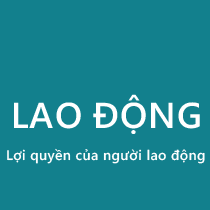
<style>
.page{position:relative;width:210px;height:210px;background:#12808d}
.page>*{position:absolute;margin:0}
.t1{font:36px "SegoeWP-Semibold";letter-spacing:0.025em;color:#ffffff}
.t2{font:14px "SegoeWP-Semibold";letter-spacing:0.025em;color:#fefefe}
</style>
<div class="page">
<p class="t1" style="left:14px;top:94px;width:186px;height:40px">LAO ĐỘNG</p>
<p class="t2" style="left:7px;top:148px;width:198px;height:16px">Lợi quyền của người lao động</p>
</div>
